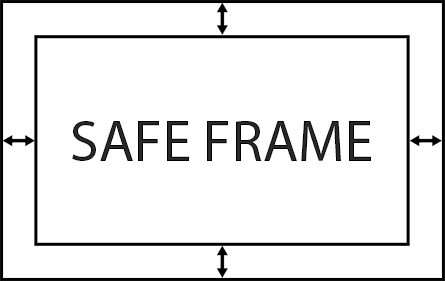
<style>
.page{position:relative;width:445px;height:281px;background:#ffffff}
.page>*{position:absolute;margin:0}
.t1{font:57.9px "MyriadPro-Regular";color:#282828}
</style>
<div class="page">
<p class="t1" style="left:72px;top:121px;width:299px;height:40px">SAFE FRAME</p>
</div>
